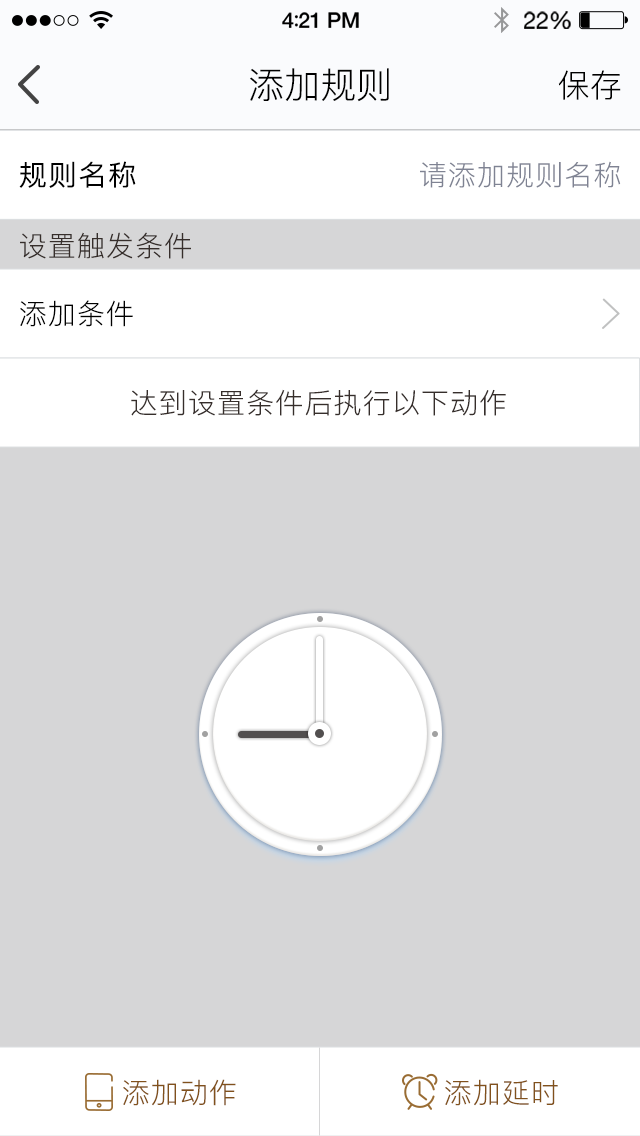
<style>
.page{position:relative;width:640px;height:1136px;background:#d6d6d7}
.page>*{position:absolute;margin:0}
.t1{font:36px "PingFang-SC-Regular";color:#000000}
.t2{font:32px "PingFang-SC-Regular"}
.t3{font:32px "PingFang-SC-Regular";color:#000000}
.t4{font:28px "PingFang-SC-Regular";letter-spacing:0.04em;color:#000000;font-weight:bold}
.t5{font:28px "PingFang-SC-Regular";letter-spacing:0.04em;color:#7f8393}
.t6{font:28px "PingFang-SC-Regular";letter-spacing:0.04em;color:#362e2b}
.t7{font:28px "PingFang-SC-Regular";letter-spacing:0.04em;color:#000000}
.t8{font:28px "PingFang-SC-Regular";letter-spacing:0.04em;color:#81511c}
</style>
<div class="page">
<p class="t1" style="left:250px;top:68px;width:139px;height:34px">添加规则</p>
<p class="t1" style="left:250px;top:68px;width:139px;height:34px">添加规则</p>
<p class="t2" style="left:558px;top:70px;width:62px;height:30px">保持</p>
<p class="t3" style="left:558px;top:70px;width:63px;height:30px">保存</p>
<p class="t4" style="left:19px;top:161px;width:117px;height:27px">规则名称</p>
<p class="t5" style="left:420px;top:161px;width:201px;height:27px">请添加规则名称</p>
<p class="t6" style="left:20px;top:232px;width:171px;height:27px">设置触发条件</p>
<p class="t7" style="left:20px;top:300px;width:113px;height:27px">添加条件</p>
<p class="t6" style="left:131px;top:389px;width:375px;height:27px">达到设置条件后执行以下动作</p>
<p class="t8" style="left:123px;top:1079px;width:113px;height:27px">添加动作</p>
<p class="t8" style="left:445px;top:1079px;width:113px;height:27px">添加延时</p>
</div>
